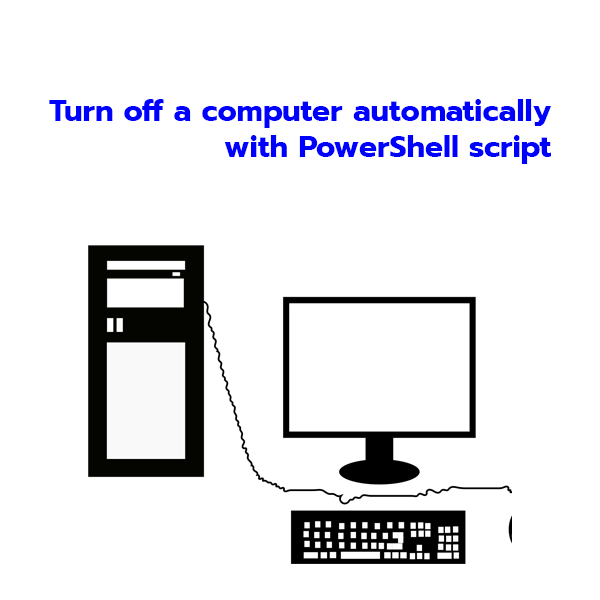
<style>
.page{position:relative;width:600px;height:600px;background:#ffffff}
.page>*{position:absolute;margin:0}
.t1{font:30px "Prompt-Bold";color:#0000ff}
</style>
<div class="page">
<p class="t1" style="left:49px;top:99px;width:503px;height:65px;text-align:right">Turn off a computer automatically<br>with PowerShell script</p>
</div>
